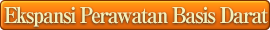
<style>
.page{position:relative;width:270px;height:30px}
.page>*{position:absolute;margin:0}
.t1{font:22px "RyuminPro-ExBold";letter-spacing:-0.08em;color:#f7efb7;scale:0.9 1}
</style>
<div class="page">
<p class="t1" style="left:4px;top:6px;width:264px;height:21px">Ekspansi Perawatan Basis Darat</p>
</div>
